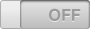
<style>
.page{position:relative;width:90px;height:30px}
.page>*{position:absolute;margin:0}
.t1{font:16.3px "Helvetica-Bold";color:#9c9c9c}
</style>
<div class="page">
<p class="t1" style="left:49px;top:8px;width:32px;height:13px">OFF</p>
</div>
